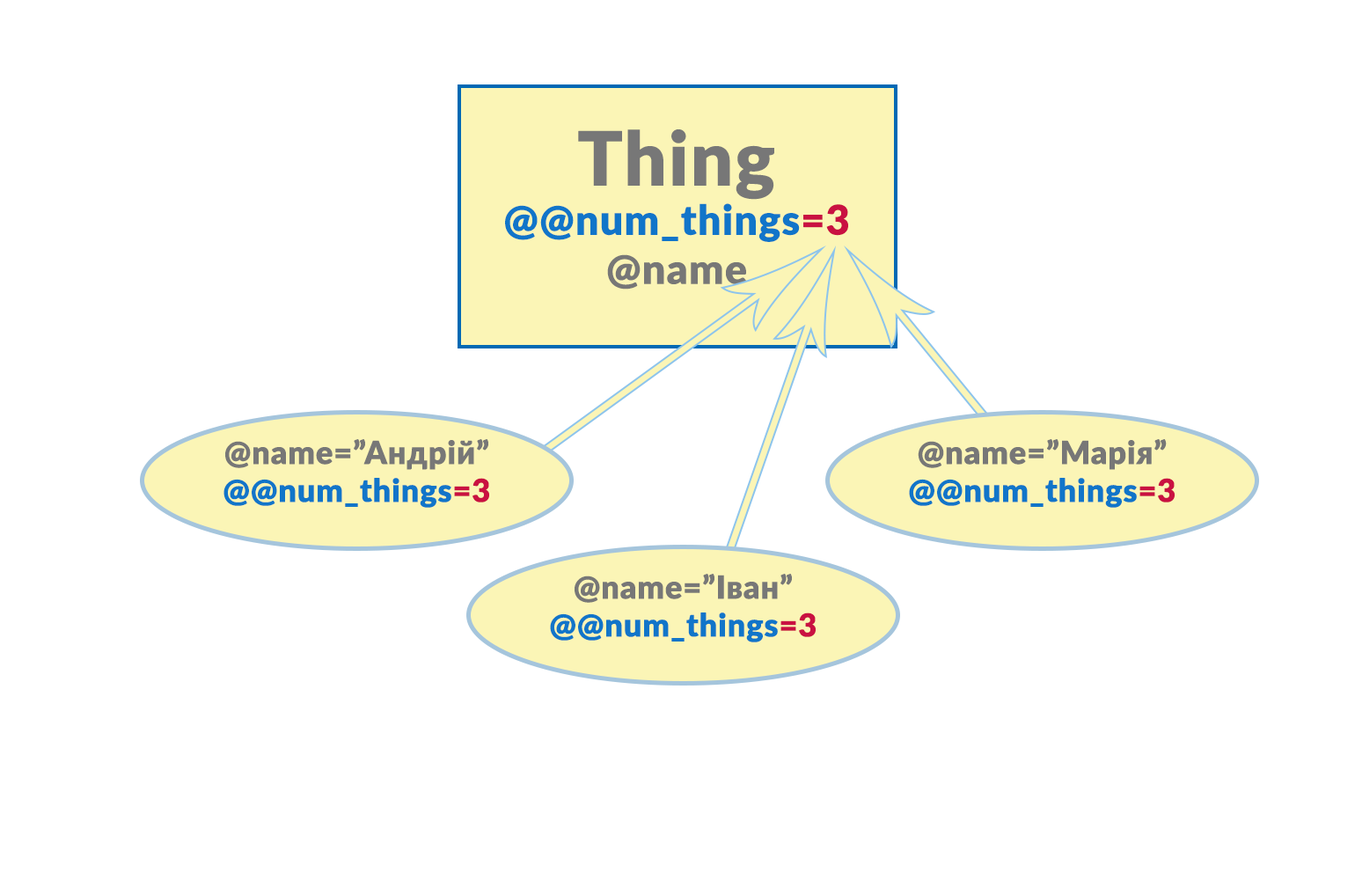
<style>
.page{position:relative;width:1355px;height:880px;background:#ffffff}
.page>*{position:absolute;margin:0}
.t1{font:41px "Lato-Black";color:#1175c9;font-weight:bold}
.t2{font:74.5px "Lato-Black";color:#777777;font-weight:bold}
.t3{font:41px "Lato-Black";color:#c91141;font-weight:bold}
.t4{font:41px "Lato-Black";color:#777777;font-weight:bold}
.t5{font:31.7px "Lato-Black";color:#777777;font-weight:bold}
.t6{font:31.7px "Lato-Black";color:#1175c9;font-weight:bold}
.t7{font:31.7px "Lato-Black";color:#c91141;font-weight:bold}
</style>
<div class="page">
<p class="t1" style="left:505px;top:129px;width:343px;height:161px;text-align:center"><span class="t2">Thing<br></span>@@num_things<span class="t3">=3<br></span><span class="t4">@name</span></p>
<p class="t5" style="left:224px;top:439px;width:265px;height:69px;text-align:center">@name=”Андрій”<br><span class="t6">@@num_things</span><span class="t7">=3</span></p>
<p class="t5" style="left:909px;top:439px;width:266px;height:69px;text-align:center">@name=”Марія”<br><span class="t6">@@num_things</span><span class="t7">=3</span></p>
<p class="t5" style="left:550px;top:574px;width:266px;height:68px;text-align:center">@name=”Іван”<br><span class="t6">@@num_things</span><span class="t7">=3</span></p>
</div>
